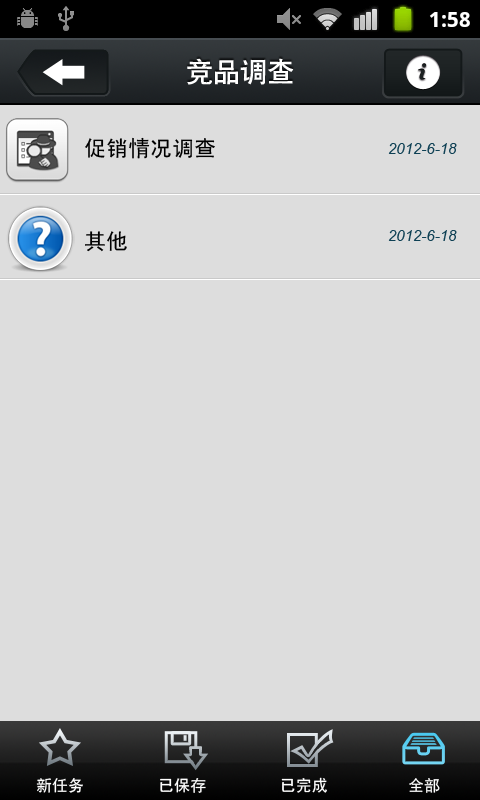
<style>
.page{position:relative;width:480px;height:800px;background:#dddddd}
.page>*{position:absolute;margin:0}
.t1{font:27px "CTCuHeiSJ";color:#ffffff}
.t2{font:22px "SimHei";color:#000000}
.t3{font:15px "Arial-ItalicMT";color:#0e4054}
.t4{font:16px "SimHei";color:#ffffff}
</style>
<div class="page">
<p class="t1" style="left:187px;top:58px;width:107px;height:27px">竞品调查</p>
<p class="t2" style="left:85px;top:137px;width:130px;height:22px">促销情况调查</p>
<p class="t3" style="left:388px;top:143px;width:69px;height:11px">2012-6-18</p>
<p class="t2" style="left:85px;top:231px;width:42px;height:21px">其他</p>
<p class="t3" style="left:388px;top:230px;width:69px;height:11px">2012-6-18</p>
<p class="t4" style="left:36px;top:778px;width:47px;height:15px">新任务</p>
<p class="t4" style="left:160px;top:778px;width:46px;height:15px">已保存</p>
<p class="t4" style="left:281px;top:777px;width:46px;height:16px">已完成</p>
<p class="t4" style="left:409px;top:778px;width:31px;height:15px">全部</p>
</div>
